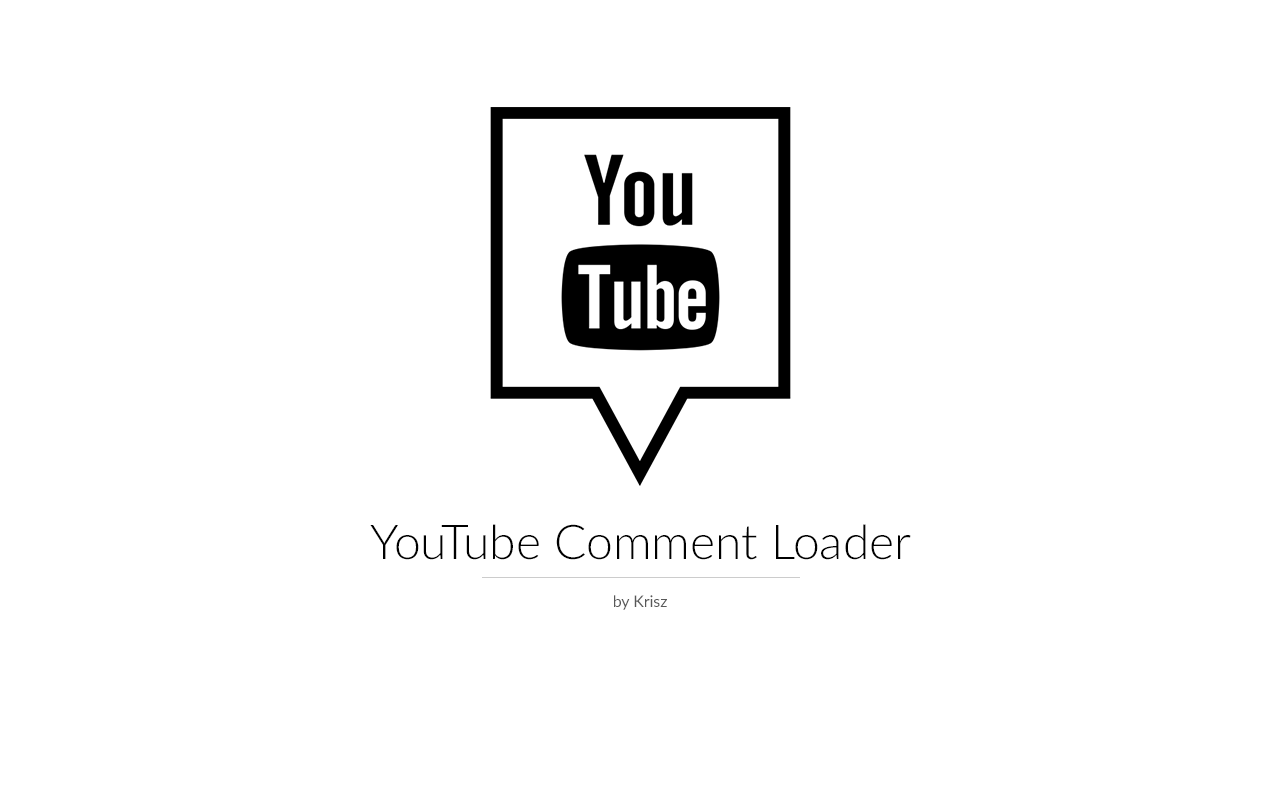
<style>
.page{position:relative;width:1280px;height:800px;background:#ffffff}
.page>*{position:absolute;margin:0}
.t1{font:48px "Lato-Light";color:#000000}
.t2{font:15.9px "Lato-Regular";color:#585858}
</style>
<div class="page">
<p class="t1" style="left:370px;top:524px;width:541px;height:36px">YouTube Comment Loader</p>
<p class="t2" style="left:614px;top:595px;width:53px;height:15px">by Krisz</p>
</div>
